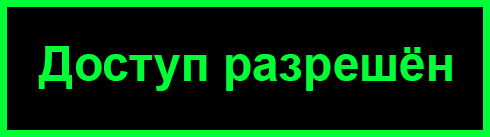
<style>
.page{position:relative;width:490px;height:137px;background:#000000}
.page>*{position:absolute;margin:0}
.t1{font:48px "Arial-BoldMT";color:#00ff36}
</style>
<div class="page">
<p class="t1" style="left:38px;top:46px;width:414px;height:45px">Доступ разрешён</p>
</div>
